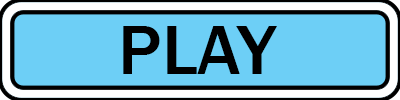
<style>
.page{position:relative;width:400px;height:100px;background:#6dcff6}
.page>*{position:absolute;margin:0}
.t1{font:72px "FranklinGothic-Medium";color:#000000}
</style>
<div class="page">
<p class="t1" style="left:123px;top:26px;width:154px;height:48px">PLAY</p>
</div>
